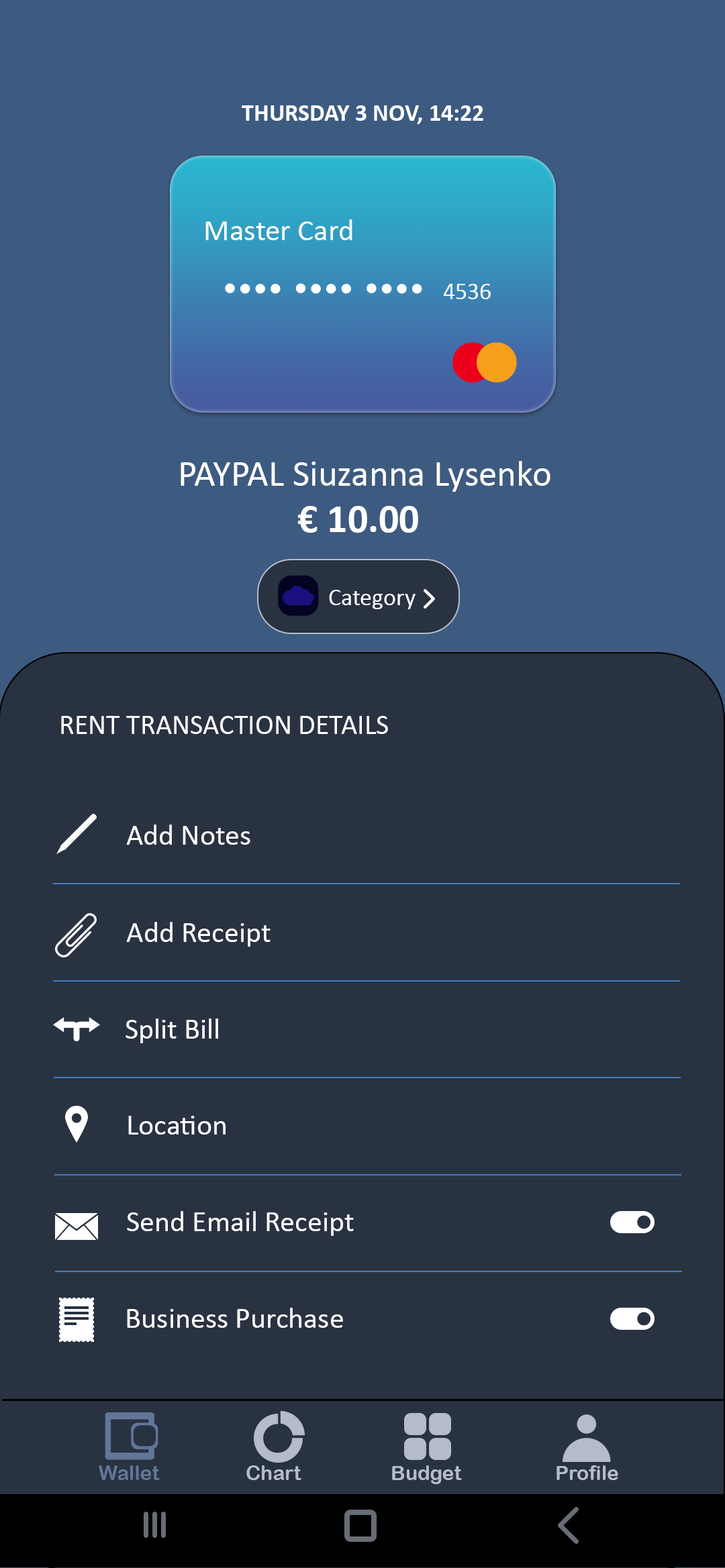
<style>
.page{position:relative;width:725px;height:1568px;background:#293241}
.page>*{position:absolute;margin:0}
.t1{font:24.2px "Calibri-Bold";color:#ffffff}
.t2{font:30.2px "Calibri";color:#ffffff}
.t3{font:24.2px "Calibri";color:#ffffff}
.t4{font:36.9px "Calibri";color:#ffffff}
.t5{font:40.3px "Calibri-Bold";color:#ffffff}
.t6{font:28.2px "Calibri";color:#ffffff}
.t7{font:29.5px "Calibri";color:#ffffff}
.t8{font:20.1px "ArialRoundedMTBold";color:#617698}
.t9{font:20.1px "ArialRoundedMTBold";color:#b4bcc9}
</style>
<div class="page">
<p class="t1" style="left:242px;top:105px;width:241px;height:19px">THURSDAY 3 NOV, 14:22</p>
<p class="t2" style="left:205px;top:219px;width:147px;height:21px">Master Card</p>
<p class="t3" style="left:443px;top:284px;width:47px;height:15px">4536</p>
<p class="t4" style="left:180px;top:461px;width:370px;height:31px">PAYPAL Siuzanna Lysenko</p>
<p class="t5" style="left:297px;top:506px;width:121px;height:27px">€ 10.00</p>
<p class="t3" style="left:329px;top:590px;width:86px;height:19px">Category</p>
<p class="t6" style="left:61px;top:716px;width:327px;height:18px">RENT TRANSACTION DETAILS</p>
<p class="t7" style="left:126px;top:825px;width:124px;height:20px">Add Notes</p>
<p class="t7" style="left:126px;top:922px;width:144px;height:25px">Add Receipt</p>
<p class="t7" style="left:125px;top:1018px;width:93px;height:25px">Split Bill</p>
<p class="t7" style="left:128px;top:1116px;width:97px;height:19px">Location</p>
<p class="t7" style="left:127px;top:1211px;width:227px;height:25px">Send Email Receipt</p>
<p class="t7" style="left:127px;top:1308px;width:216px;height:20px">Business Purchase</p>
<p class="t8" style="left:99px;top:1465px;width:61px;height:15px">Wallet</p>
<p class="t9" style="left:246px;top:1465px;width:55px;height:15px">Chart</p>
<p class="t9" style="left:392px;top:1465px;width:70px;height:19px">Budget</p>
<p class="t9" style="left:556px;top:1465px;width:62px;height:15px">Profile</p>
</div>
